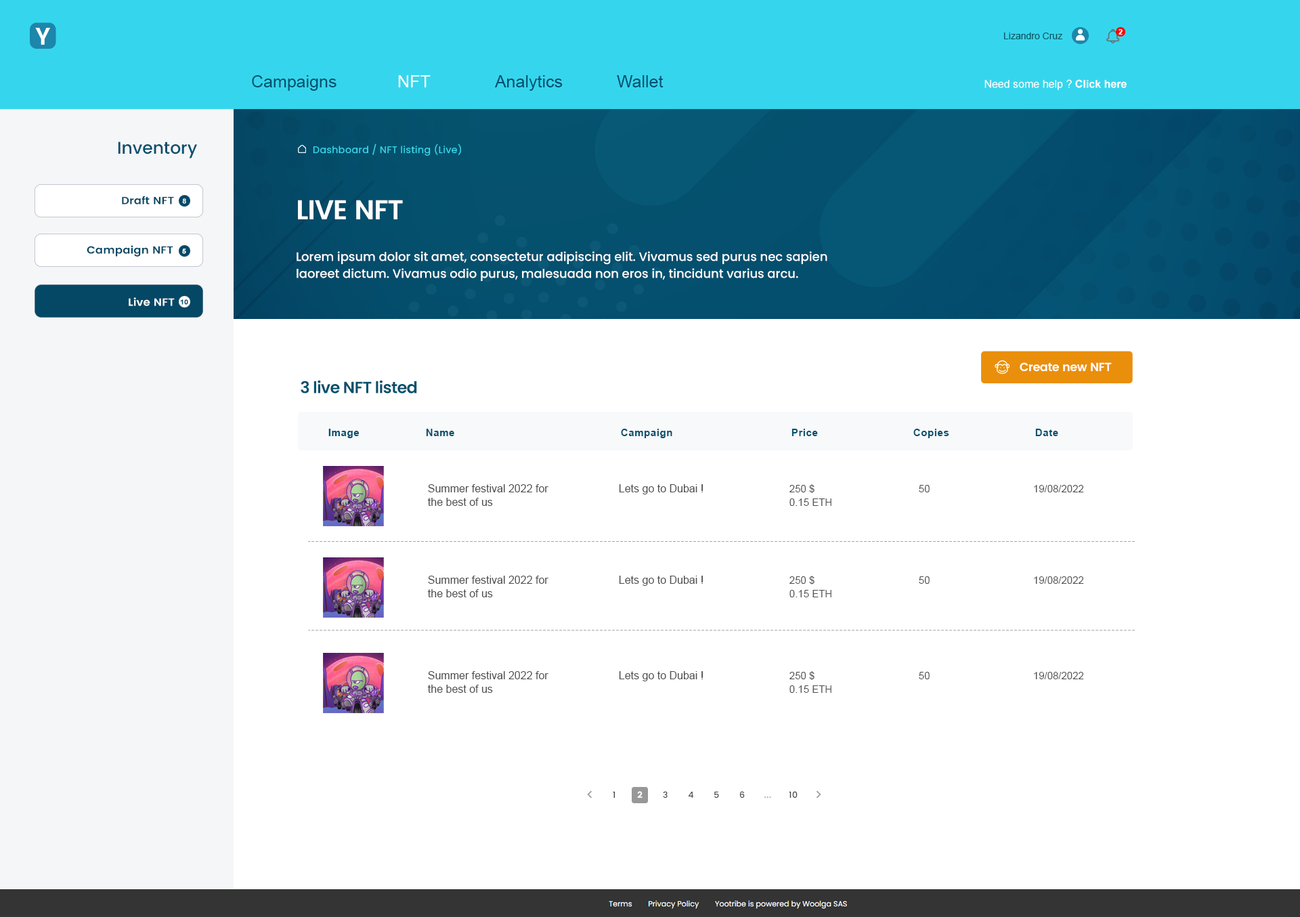
<style>
.page{position:relative;width:1300px;height:917px;background:#ffffff}
.page>*{position:absolute;margin:0}
.t1{font:23.7px "Poppins-SemiBold";color:#ffffff}
.t2{font:7.4px "Arial-BoldMT";color:#ffffff}
.t3{font:9.5px "ArialMT";color:#105761}
.t4{font:16.9px "ArialMT";color:#044d6e}
.t5{font:16.9px "ArialMT";color:#04506e}
.t6{font:16.9px "ArialMT";color:#ffffff}
.t7{font:10.8px "ArialMT";color:#ffffff}
.t8{font:10.8px "Arial-BoldMT";color:#ffffff}
.t9{font:16.9px "Poppins-Medium";color:#05506d}
.t10{font:9.5px "Poppins-Regular";letter-spacing:0.04em;color:#38d8ec}
.t11{font:10.5px "Poppins-SemiBold";color:#044866;scale:1.07 1}
.t12{font:6.8px "Arial-BoldMT";color:#ffffff;scale:1.07 1}
.t13{font:6.8px "Poppins-SemiBold";color:#ffffff;scale:1.07 1}
.t14{font:27.1px "Poppins-SemiBold";letter-spacing:-0.03em;color:#ffffff}
.t15{font:12.2px/16.9px "Poppins-Medium";color:#ffffff}
.t16{font:10.5px "Poppins-SemiBold";color:#ffffff;scale:1.07 1}
.t17{font:6.8px "Arial-BoldMT";color:#044866;scale:1.07 1}
.t18{font:11.9px "Poppins-SemiBold";letter-spacing:-0.03em;color:#ffffff}
.t19{font:16.3px "Poppins-SemiBold";letter-spacing:-0.03em;color:#05516d}
.t20{font:10.2px "Arial-BoldMT";letter-spacing:0.04em;color:#05506d}
.t21{font:10.8px/13.5px "ArialMT";color:#4e4e4e}
.t22{font:10.8px "ArialMT";color:#4e4e4e}
.t23{font:10.2px/13.5px "ArialMT";color:#4e4e4e}
.t24{font:10.2px "ArialMT";color:#4e4e4e}
</style>
<div class="page">
<p class="t1" style="left:35px;top:28px;width:15px;height:17px">Y</p>
<p class="t2" style="left:1119px;top:29px;width:4px;height:6px">2</p>
<p class="t3" style="left:1004px;top:33px;width:59px;height:6px">Lizandro Cruz</p>
<p class="t4" style="left:252px;top:75px;width:412px;height:16px"><span class="t5">Campaigns   </span><span class="t6">NFT</span>   Analytics   Wallet</p>
<p class="t7" style="left:985px;top:79px;width:142px;height:11px">Need some help ? <span class="t8">Click here</span></p>
<p class="t9" style="left:118px;top:142px;width:79px;height:16px">Inventory</p>
<p class="t10" style="left:313px;top:144px;width:148px;height:12px">Dashboard / NFT listing (Live)</p>
<p class="t11" style="left:122px;top:196px;width:52px;height:9px">Draft NFT</p>
<p class="t12" style="left:182px;top:198px;width:4px;height:6px"><span class="t13"> </span>8</p>
<p class="t14" style="left:298px;top:200px;width:105px;height:19px">LIVE NFT</p>
<p class="t11" style="left:87px;top:245px;width:86px;height:12px">Campaign NFT</p>
<p class="t12" style="left:182px;top:249px;width:4px;height:5px">5</p>
<p class="t15" style="left:297px;top:251px;width:531px;height:30px">Lorem ipsum dolor sit amet, consectetur adipiscing elit. Vivamus sed purus nec sapien laoreet dictum. Vivamus odio purus, malesuada non eros in, tincidunt varius arcu.</p>
<p class="t16" style="left:129px;top:297px;width:46px;height:9px">Live NFT</p>
<p class="t17" style="left:180px;top:299px;width:8px;height:6px">10</p>
<p class="t18" style="left:1020px;top:362px;width:92px;height:10px">Create new NFT</p>
<p class="t19" style="left:301px;top:380px;width:116px;height:13px">3 live NFT listed</p>
<p class="t20" style="left:328px;top:429px;width:731px;height:9px">Image   Name       Campaign     Price    Copies    Date</p>
<p class="t21" style="left:427px;top:484px;width:122px;height:22px">Summer festival 2022 for<br>the best of us</p>
<p class="t22" style="left:619px;top:484px;width:84px;height:10px">Lets go to Dubai !</p>
<p class="t23" style="left:790px;top:484px;width:42px;height:22px">250 $<br>0.15 ETH</p>
<p class="t24" style="left:919px;top:485px;width:11px;height:7px">50</p>
<p class="t24" style="left:1034px;top:485px;width:50px;height:7px">19/08/2022</p>
</div>
